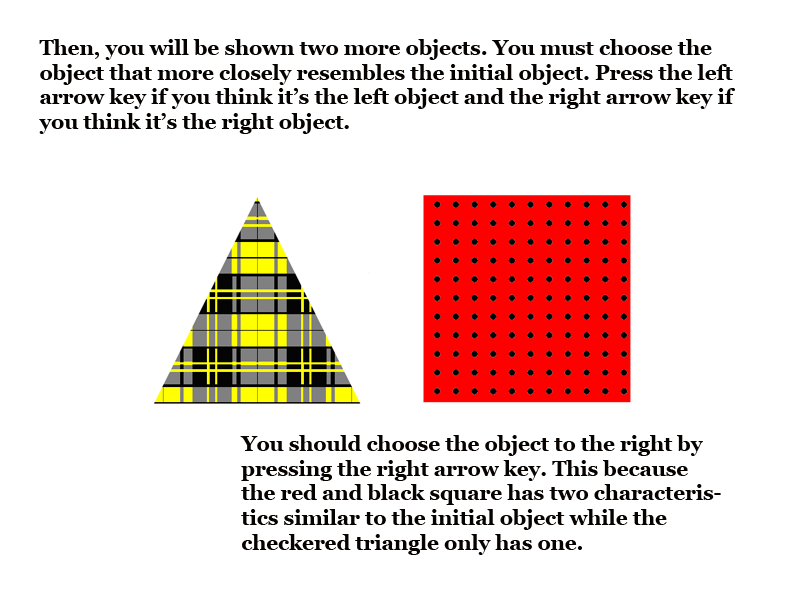
<style>
.page{position:relative;width:792px;height:594px;background:#ffffff}
.page>*{position:absolute;margin:0}
.t1{font:20.6px "Georgia-Bold";color:#060200}
</style>
<div class="page">
<p class="t1" style="left:39px;top:39px;width:696px;height:95px">Then, you will be shown two more objects. You must choose the object that more closely resembles the initial object. Press the left arrow key if you think it’s the left object and the right arrow key if you think it’s the right object.</p>
<p class="t1" style="left:240px;top:435px;width:481px;height:120px">You should choose the object to the right by pressing the right arrow key. This because the red and black square has two characteristics similar to the initial object while the checkered triangle only has one.</p>
</div>
